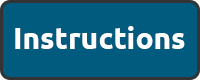
<style>
.page{position:relative;width:200px;height:80px;background:#005b7f}
.page>*{position:absolute;margin:0}
.t1{font:30px "Ubuntu-Bold";color:#ffffff}
</style>
<div class="page">
<p class="t1" style="left:15px;top:26px;width:170px;height:23px">Instructions</p>
</div>
